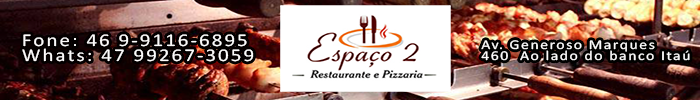
<style>
.page{position:relative;width:700px;height:100px}
.page>*{position:absolute;margin:0}
.t1{font:18px/14.9px "Calibri";letter-spacing:0.1em;color:#fcfbfb;scale:1.16 1}
.t2{font:13.5px/11.2px "Calibri";letter-spacing:0.1em;color:#fcfbfb;scale:1.16 1}
</style>
<div class="page">
<p class="t1" style="left:22px;top:34px;width:232px;height:28px">Fone: 46 9-9116-6895<br>Whats: 47 99267-3059</p>
<p class="t2" style="left:481px;top:40px;width:209px;height:21px">Av. Generoso Marques <br>460  Ao lado do banco Itaú</p>
</div>
